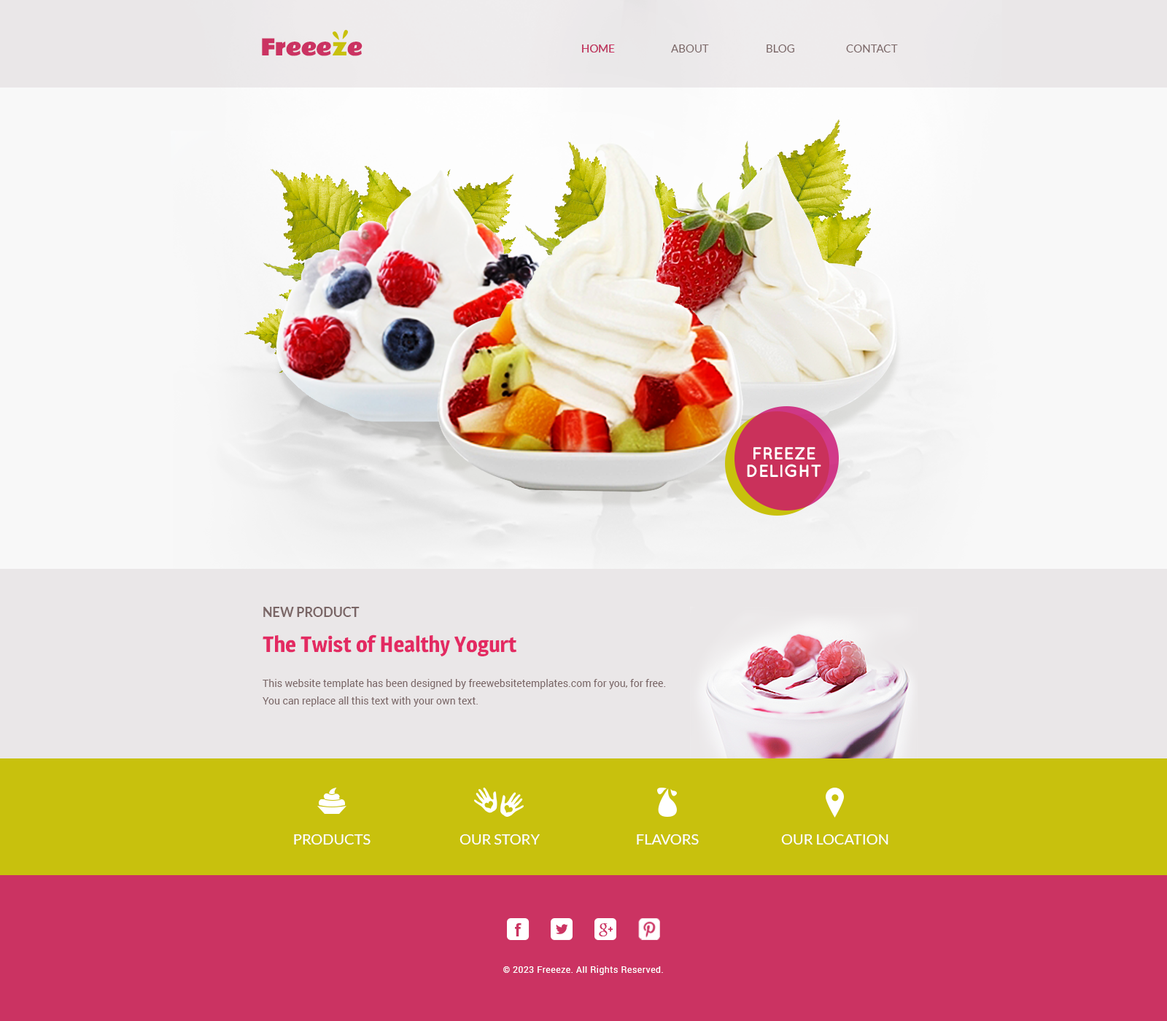
<style>
.page{position:relative;width:1167px;height:1021px}
.page>*{position:absolute;margin:0}
.t1{font:21.9px "RammettoOne-Regular";letter-spacing:-0.02em;color:#cb3362}
.t2{font:21.9px "RammettoOne-Regular";letter-spacing:-0.02em;color:#c8c10d}
.t3{font:10.9px "Lato-Regular";color:#cb3362}
.t4{font:10.9px "Lato-Regular";color:#7a6666}
.t5{font:17.5px/17.5px "Quicksand-Bold";color:#ffffff}
.t6{font:10.9px/17.5px "Roboto-Regular";color:#4c4b45}
.t7{font:13.1px/17.5px "Lato-Bold";color:#7a6666}
.t8{font:21.9px/17.5px "Magra-Bold";color:#e32a62}
.t9{font:10.2px/17.5px "Roboto-Regular";color:#7a6666}
.t10{font:10.9px/17.5px "Roboto-Regular";color:#837c76}
.t11{font:14.6px "Lato-Regular";color:#ffffff}
.t12{font:18.2px "Arial-BoldMT";letter-spacing:0.05em;color:#cb3362}
.t13{font:8.8px "Roboto-Regular";letter-spacing:0.05em;color:#ffffff}
</style>
<div class="page">
<p class="t1" style="left:262px;top:38px;width:101px;height:18px">Freee<span class="t2">z</span>e</p>
<p class="t3" style="left:582px;top:45px;width:33px;height:8px">HOME</p>
<p class="t3" style="left:582px;top:45px;width:33px;height:8px">HOME</p>
<p class="t4" style="left:671px;top:45px;width:38px;height:8px">ABOUT</p>
<p class="t4" style="left:767px;top:45px;width:28px;height:8px">BLOG</p>
<p class="t4" style="left:846px;top:45px;width:52px;height:8px">CONTACT</p>
<p class="t5" style="left:747px;top:447px;width:75px;height:30px;text-align:center">FREEZE<br>DELIGHT</p>
<p class="t6" style="left:263px;top:607px;width:403px;height:100px"><span class="t7">NEW PRODUCT<br><br></span><span class="t8">The Twist of Healthy Yogurt<br><br></span><span class="t9">This website template has been designed by freewebsitetemplates.com for you, for free. You can replace all this text with your own text. <br></span><span class="t10">You can remove any link to our website from this website template.<br><br></span>, you're free to use this website template without linking back to us. <br><br><br><br>This website template has been designed by freewebsitetemplates.com for you, for free. You can replace all this text with your own text. You can remove any link to our website from this website template, you're free to use this website template without linking back to us. If you're having problems editing this website template, then don't hesitate to ask for help on the</p>
<p class="t11" style="left:294px;top:835px;width:77px;height:10px">PRODUCTS</p>
<p class="t11" style="left:460px;top:835px;width:80px;height:10px">OUR STORY</p>
<p class="t11" style="left:637px;top:835px;width:62px;height:10px">FLAVORS</p>
<p class="t11" style="left:781px;top:835px;width:108px;height:10px">OUR LOCATION</p>
<p class="t12" style="left:515px;top:923px;width:7px;height:14px">f</p>
<p class="t13" style="left:503px;top:966px;width:160px;height:9px">© 2023 Freeeze. All Rights Reserved.</p>
</div>
